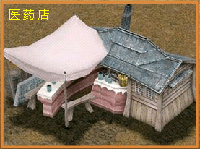
<style>
.page{position:relative;width:200px;height:149px}
.page>*{position:absolute;margin:0}
.t1{font:12px "SimSun";letter-spacing:0.2em;color:#fcff01}
</style>
<div class="page">
<p class="t1" style="left:9px;top:9px;width:40px;height:11px">医药店</p>
</div>
